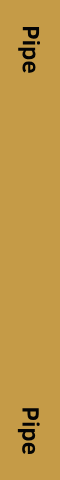
<style>
.page{position:relative;width:60px;height:480px;background:#c59b47}
.page>*{position:absolute;margin:0}
.t1{font:24px "ClearSans-Bold";color:#040404}
</style>
<div class="page">
<p class="t1" style="left:18px;top:26px;width:23px;height:47px;rotate:90deg">Pipe</p>
<p class="t1" style="left:17px;top:408px;width:23px;height:47px;rotate:90deg">Pipe</p>
</div>
